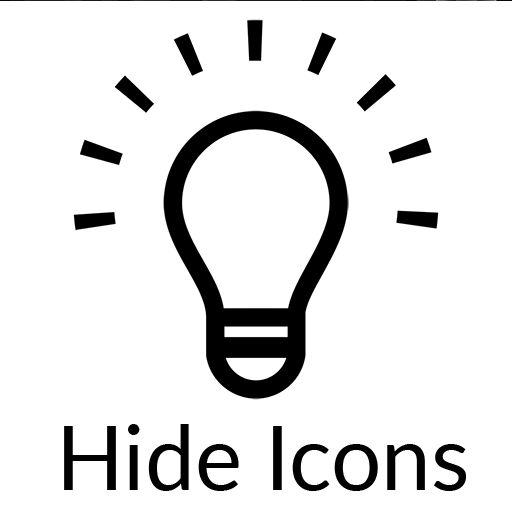
<style>
.page{position:relative;width:512px;height:512px;background:#ffffff}
.page>*{position:absolute;margin:0}
.t1{font:89.4px "Lato-Regular";color:#010101}
</style>
<div class="page">
<p class="t1" style="left:64px;top:423px;width:403px;height:67px">Hide Icons</p>
</div>
